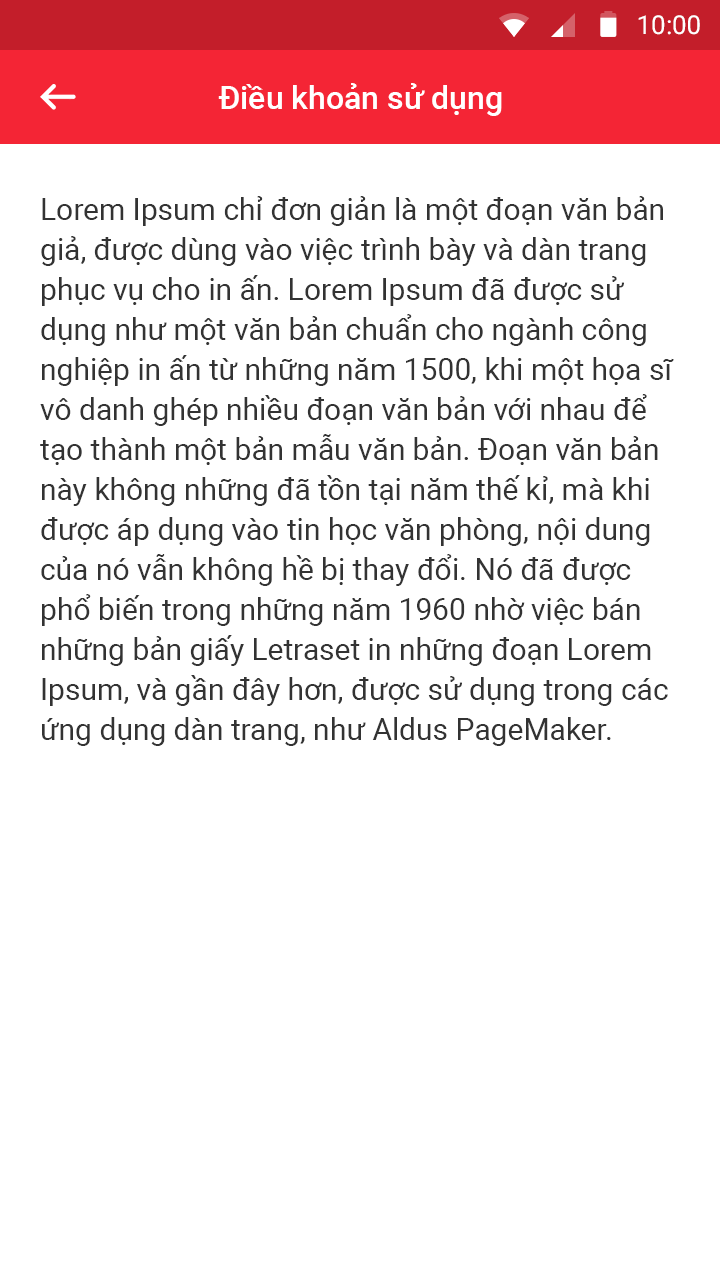
<style>
.page{position:relative;width:720px;height:1280px;background:#ffffff}
.page>*{position:absolute;margin:0}
.t1{font:26px "Roboto-Regular";color:#ffffff}
.t2{font:32px "Roboto-Medium";color:#ffffff}
.t3{font:30px/40px "Roboto-Regular";color:#333333}
</style>
<div class="page">
<p class="t1" style="left:638px;top:15px;width:62px;height:20px">10:00</p>
<p class="t2" style="left:218px;top:83px;width:284px;height:33px">Điều khoản sử dụng</p>
<p class="t3" style="left:40px;top:196px;width:634px;height:550px">Lorem Ipsum chỉ đơn giản là một đoạn văn bản giả, được dùng vào việc trình bày và dàn trang phục vụ cho in ấn. Lorem Ipsum đã được sử dụng như một văn bản chuẩn cho ngành công nghiệp in ấn từ những năm 1500, khi một họa sĩ vô danh ghép nhiều đoạn văn bản với nhau để tạo thành một bản mẫu văn bản. Đoạn văn bản này không những đã tồn tại năm thế kỉ, mà khi được áp dụng vào tin học văn phòng, nội dung của nó vẫn không hề bị thay đổi. Nó đã được phổ biến trong những năm 1960 nhờ việc bán những bản giấy Letraset in những đoạn Lorem Ipsum, và gần đây hơn, được sử dụng trong các ứng dụng dàn trang, như Aldus PageMaker.</p>
</div>
